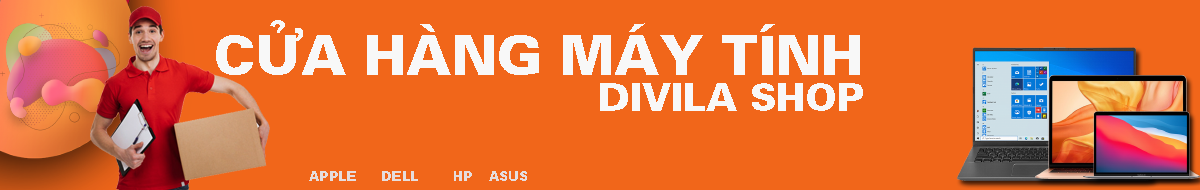
<style>
.page{position:relative;width:1200px;height:190px;background:#f1661a}
.page>*{position:absolute;margin:0}
.t1{font:54.2px "VNIUSAHeavy-Bold";color:#f8f8f8}
.t2{font:37.5px "VNIUSAHeavy-Bold";color:#f8f8f8}
.t3{font:12.5px "VNIUSAHeavy-Bold";color:#e6dddd}
</style>
<div class="page">
<p class="t1" style="left:216px;top:20px;width:644px;height:55px">CÖÛA HAØNG MAÙY TÍNH</p>
<p class="t2" style="left:600px;top:83px;width:263px;height:28px">DIVILA SHOP</p>
<p class="t3" style="left:309px;top:171px;width:218px;height:10px">APPLE DELL HP ASUS</p>
</div>
